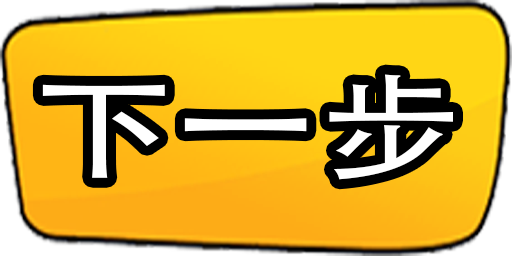
<style>
.page{position:relative;width:512px;height:256px}
.page>*{position:absolute;margin:0}
.t1{font:112.9px "AdobeHeitiStd-Regular";letter-spacing:0.012em;color:#ffffff;scale:1.26 1}
</style>
<div class="page">
<p class="t1" style="left:42px;top:74px;width:411px;height:106px">下一步</p>
</div>
